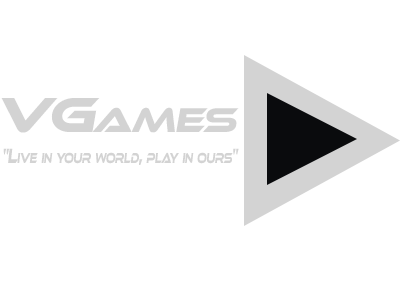
<style>
.page{position:relative;width:400px;height:300px;background:#ffffff}
.page>*{position:absolute;margin:0}
.t1{font:51px "EthnocentricRg-Italic";letter-spacing:-0.05em;color:#d3d3d3;font-variant:small-caps}
.t2{font:21.3px "EthnocentricRg-Italic";letter-spacing:-0.05em;color:#d3d3d3;font-variant:small-caps;scale:0.61 1}
</style>
<div class="page">
<p class="t1" style="left:1px;top:98px;width:238px;height:35px">VGames</p>
<p class="t2" style="left:3px;top:148px;width:236px;height:17px">"Live in your world, play in ours"</p>
</div>
